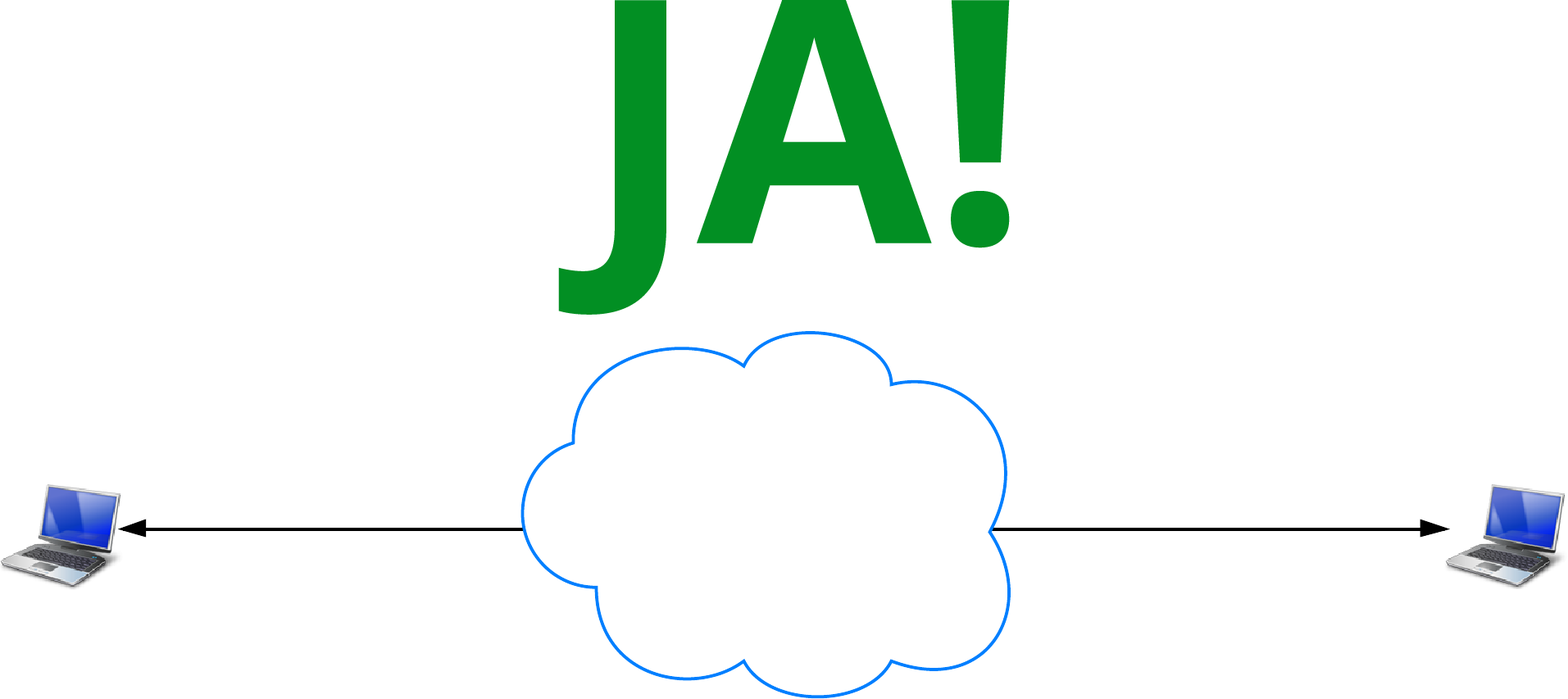
<style>
.page{position:relative;width:1568px;height:699px;background:#ffffff}
.page>*{position:absolute;margin:0}
.t1{font:340.2px "OpenSans-Bold";color:#028f23}
</style>
<div class="page">
<p class="t1" style="left:558px;top:0px;width:452px;height:315px">JA!</p>
</div>
